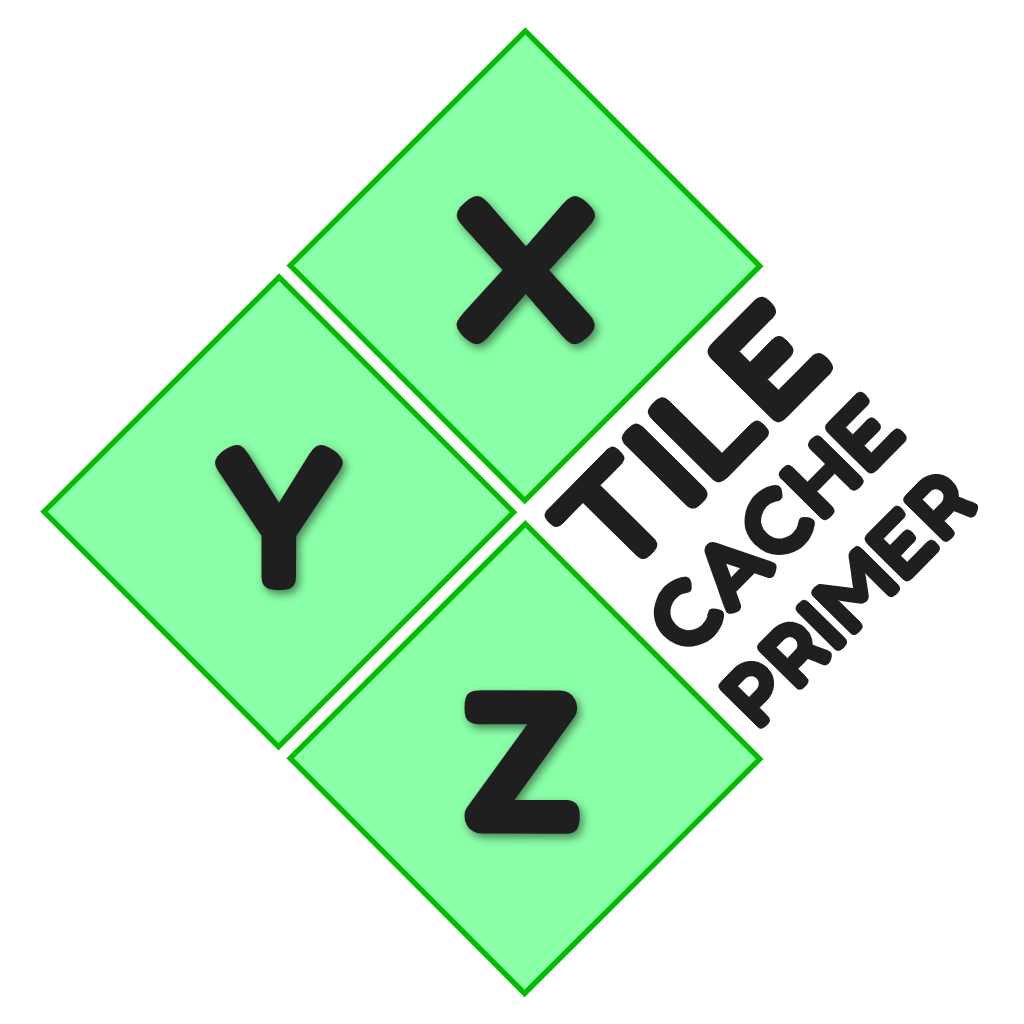
<style>
.page{position:relative;width:1024px;height:1024px;background:#ffffff}
.page>*{position:absolute;margin:0}
.t1{font:194.6px "FredokaOne-Regular";color:#1f1f1f}
.t2{font:86.8px/101.2px "FredokaOne-Regular";color:#1f1f1f}
.t3{font:144px "FredokaOne-Regular";color:#1f1f1f}
.t4{font:144px/74.7px "FredokaOne-Regular";color:#1f1f1f}
.t5{font:93.9px/101.2px "FredokaOne-Regular";color:#1f1f1f}
</style>
<div class="page">
<p class="t1" style="left:456px;top:196px;width:139px;height:149px">X</p>
<p class="t2" style="left:544px;top:296px;width:434px;height:433px;rotate:-45deg"><span class="t3">T</span><span class="t4">ILE<br></span><span class="t5">CACHE<br></span>PRIMER</p>
<p class="t1" style="left:215px;top:445px;width:128px;height:146px">Y</p>
<p class="t1" style="left:464px;top:690px;width:116px;height:144px">Z</p>
</div>
